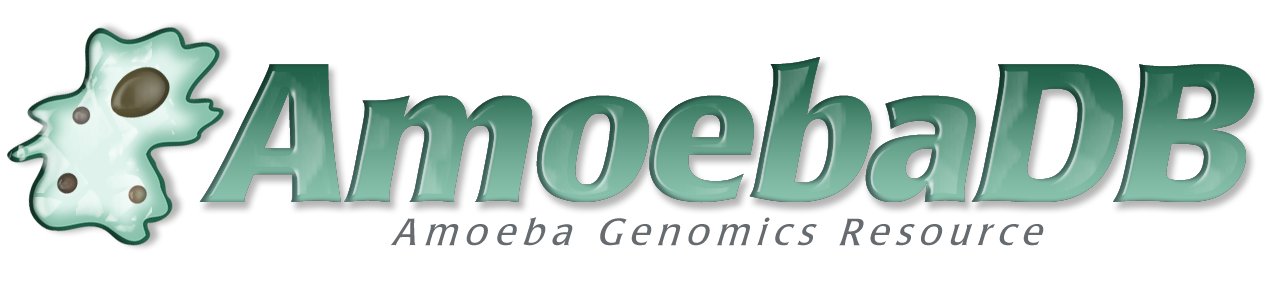
<style>
.page{position:relative;width:1264px;height:303px;background:#ffffff}
.page>*{position:absolute;margin:0}
.t1{font:200px "PopplLaudatio-Bold";letter-spacing:-0.03em}
.t2{font:38.9px "LaudatioC";letter-spacing:0.19em;color:#666b6f;scale:0.96 1}
</style>
<div class="page">
<p class="t1" style="left:199px;top:57px;width:1056px;height:146px">AmoebaDB</p>
<p class="t2" style="left:390px;top:217px;width:654px;height:29px">Amoeba Genomics Resource</p>
</div>
